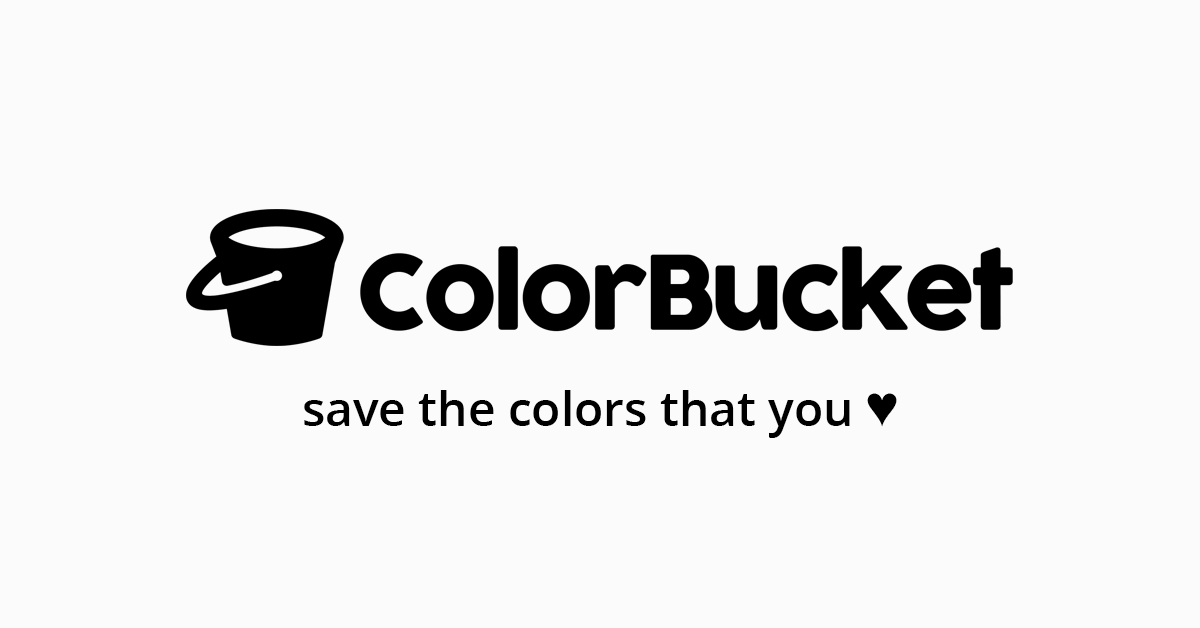
<style>
.page{position:relative;width:1200px;height:628px;background:#fbfbfb}
.page>*{position:absolute;margin:0}
.t1{font:47.9px "OpenSans-Semibold";color:#000000}
.t2{font:53.9px "ArialMT";color:#000000}
</style>
<div class="page">
<p class="t1" style="left:304px;top:390px;width:593px;height:48px">save the colors that you <span class="t2">♥</span></p>
</div>
